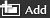
<style>
.page{position:relative;width:50px;height:18px;background:#333333}
.page>*{position:absolute;margin:0}
.t1{font:12px "AmiraParadiso";color:#fffefe}
</style>
<div class="page">
<p class="t1" style="left:25px;top:5px;width:22px;height:9px">Add</p>
</div>
